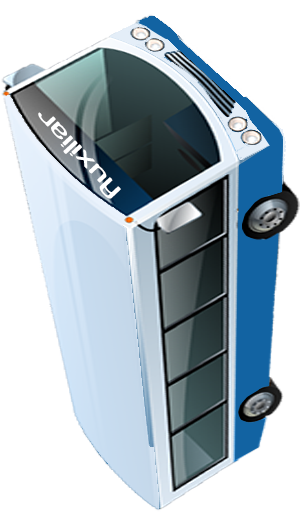
<style>
.page{position:relative;width:300px;height:512px;background:#ffffff}
.page>*{position:absolute;margin:0}
.t1{font:24.8px "BobcaygeonPlainBRK";color:#ffffff;scale:2.5 1}
</style>
<div class="page">
<p class="t1" style="left:38px;top:112px;width:83px;height:87px;rotate:-133deg">Auxiliar</p>
</div>
